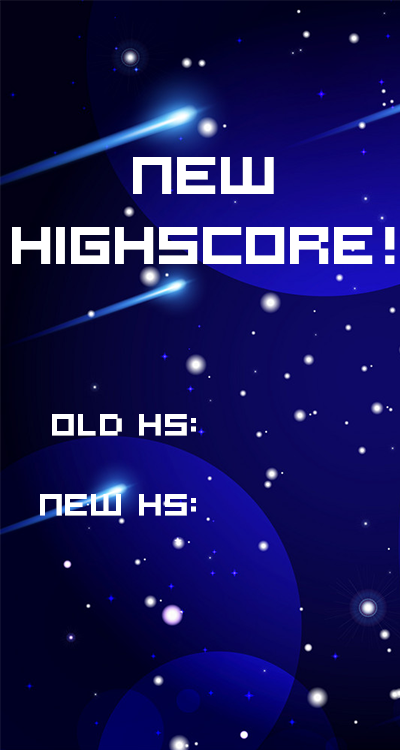
<style>
.page{position:relative;width:400px;height:750px}
.page>*{position:absolute;margin:0}
.t1{font:58.3px "Hooge0553";letter-spacing:-0.025em;color:#ffffff;font-weight:bold}
.t2{font:33.3px "Hooge0553";color:#ffffff;font-weight:bold}
</style>
<div class="page">
<p class="t1" style="left:12px;top:157px;width:383px;height:107px;text-align:center">new<br>highscore!</p>
<p class="t2" style="left:40px;top:414px;width:156px;height:102px;text-align:right">old hs:<br><br>new hs:</p>
</div>
